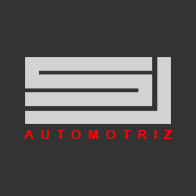
<style>
.page{position:relative;width:196px;height:196px;background:#333333}
.page>*{position:absolute;margin:0}
.t1{font:13.4px "ArialNarrow-Bold";letter-spacing:0.4em;color:#ff0303;scale:1.22 1}
</style>
<div class="page">
<p class="t1" style="left:24px;top:130px;width:148px;height:9px">AUTOMOTRIZ</p>
</div>
